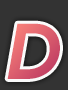
<style>
.page{position:relative;width:68px;height:90px;background:#333333}
.page>*{position:absolute;margin:0}
.t1{font:77px "ProductSans-BoldItalic";letter-spacing:-0.22em;color:#dc5e6e}
</style>
<div class="page">
<p class="t1" style="left:7px;top:23px;width:53px;height:56px">D</p>
</div>
